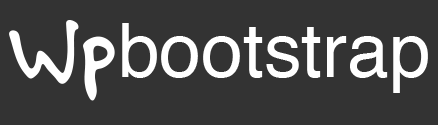
<style>
.page{position:relative;width:438px;height:125px;background:#333333}
.page>*{position:absolute;margin:0}
.t1{font:109.2px "FeltTipRoman";color:#ffffff}
.t2{font:75px "Helvetica";color:#ffffff}
</style>
<div class="page">
<p class="t1" style="left:9px;top:20px;width:106px;height:81px">Wp</p>
<p class="t2" style="left:122px;top:23px;width:306px;height:70px">bootstrap</p>
</div>
